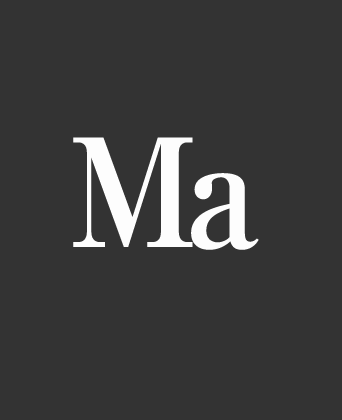
<style>
.page{position:relative;width:342px;height:420px;background:#333333}
.page>*{position:absolute;margin:0}
.t1{font:150px "RyuminPro-ExBold";letter-spacing:-0.08em;color:#fdfdfd;scale:0.9 1}
</style>
<div class="page">
<p class="t1" style="left:73px;top:137px;width:186px;height:113px">Ma</p>
</div>
